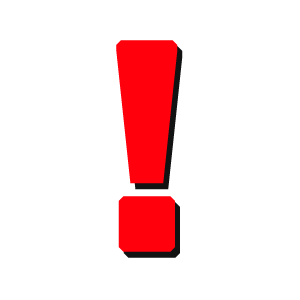
<style>
.page{position:relative;width:300px;height:300px;background:#ffffff}
.page>*{position:absolute;margin:0}
.t1{font:288.8px "GothamBold";letter-spacing:0.06em;color:#ff000c;font-weight:bold}
</style>
<div class="page">
<p class="t1" style="left:116px;top:40px;width:62px;height:212px">!</p>
</div>
